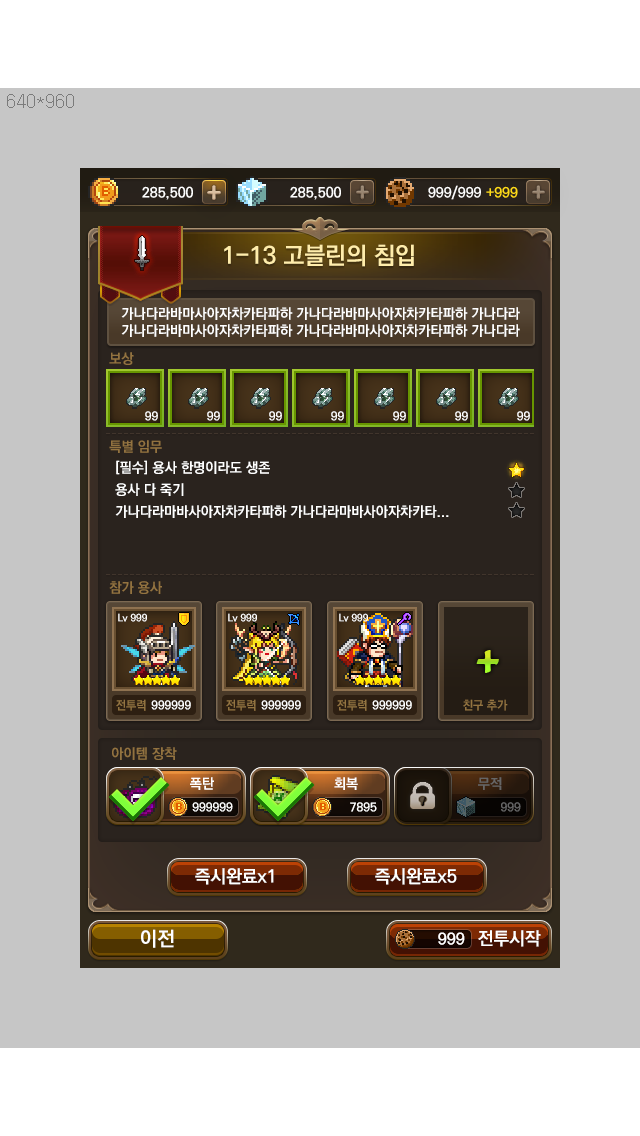
<style>
.page{position:relative;width:640px;height:1136px;background:#c6c6c6}
.page>*{position:absolute;margin:0}
.t1{font:24px "KoPubDotumBold";color:#ffedab}
.t2{font:14px "KoPubDotumBold";color:#ffffff}
.t3{font:14px "KoPubDotumBold";color:#937340}
.t4{font:12px "KoPubDotumBold";color:#ffffff}
.t5{font:14px/22px "KoPubDotumBold";color:#ffffff}
.t6{font:10px "KoPubDotumBold";color:#ffffff}
.t7{font:12px "KoPubDotumBold";color:#937441}
.t8{font:14px "KoPubDotumBold";color:#666666}
.t9{font:12px "KoPubDotumBold";color:#666666}
.t10{font:18px "KoPubDotumBold";color:#ffffff}
.t11{font:20px "KoPubDotumBold";color:#ffffff}
.t12{font:16px "KoPubDotumBold";color:#ffffff}
</style>
<div class="page">
<p class="t1" style="left:224px;top:244px;width:190px;height:23px">1-13 고블린의 침입</p>
<p class="t2" style="left:121px;top:307px;width:399px;height:30px">가나다라바마사아자차카타파하 가나다라바마사아자차카타파하 가나다라<br>가나다라바마사아자차카타파하 가나다라바마사아자차카타파하 가나다라</p>
<p class="t3" style="left:109px;top:352px;width:25px;height:13px">보상</p>
<p class="t4" style="left:145px;top:411px;width:13px;height:10px">99</p>
<p class="t3" style="left:109px;top:440px;width:53px;height:13px">특별 임무</p>
<p class="t5" style="left:115px;top:460px;width:334px;height:58px">[필수] 용사 한명이라도 생존<br>용사 다 죽기<br>가나다라마바사아자차카타파하 가나다라마바사아자차카타...</p>
<p class="t3" style="left:109px;top:581px;width:53px;height:13px">참가 용사</p>
<p class="t6" style="left:118px;top:613px;width:29px;height:9px">Lv 999</p>
<p class="t6" style="left:228px;top:613px;width:29px;height:9px">Lv 999</p>
<p class="t6" style="left:339px;top:613px;width:29px;height:9px">Lv 999</p>
<p class="t7" style="left:116px;top:699px;width:30px;height:12px">전투력</p>
<p class="t4" style="left:151px;top:700px;width:40px;height:10px">999999</p>
<p class="t7" style="left:226px;top:699px;width:30px;height:12px">전투력</p>
<p class="t4" style="left:261px;top:700px;width:40px;height:10px">999999</p>
<p class="t7" style="left:337px;top:699px;width:30px;height:12px">전투력</p>
<p class="t4" style="left:372px;top:700px;width:40px;height:10px">999999</p>
<p class="t7" style="left:463px;top:699px;width:45px;height:12px">친구 추가</p>
<p class="t3" style="left:112px;top:747px;width:65px;height:13px">아이템 장착</p>
<p class="t2" style="left:190px;top:777px;width:24px;height:13px">폭탄</p>
<p class="t2" style="left:334px;top:777px;width:24px;height:13px">회복</p>
<p class="t8" style="left:478px;top:777px;width:24px;height:13px">무적</p>
<p class="t4" style="left:192px;top:802px;width:41px;height:10px">999999</p>
<p class="t4" style="left:350px;top:802px;width:27px;height:10px">7895</p>
<p class="t9" style="left:501px;top:802px;width:20px;height:10px">999</p>
<p class="t10" style="left:195px;top:868px;width:79px;height:17px">즉시완료x1</p>
<p class="t10" style="left:375px;top:868px;width:82px;height:17px">즉시완료x5</p>
<p class="t11" style="left:141px;top:929px;width:33px;height:19px">이전</p>
<p class="t12" style="left:438px;top:932px;width:27px;height:13px">999</p>
<p class="t10" style="left:478px;top:930px;width:63px;height:17px">전투시작</p>
</div>
